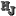
<style>
.page{position:relative;width:16px;height:16px;background:#ffffff}
.page>*{position:absolute;margin:0}
.t1{font:11.1px "Century";letter-spacing:0.025em;color:#616161;font-weight:bold;scale:0.93 1}
.t2{font:11.1px "Century";letter-spacing:0.025em;color:#444444;font-weight:bold;scale:0.93 1}
.t3{font:11.4px "Century";letter-spacing:0.025em;font-weight:bold;scale:1.03 1}
</style>
<div class="page">
<p class="t1" style="left:0px;top:1px;width:9px;height:9px">H</p>
<p class="t2" style="left:1px;top:2px;width:9px;height:9px">H</p>
<p class="t3" style="left:8px;top:7px;width:8px;height:9px">J</p>
</div>
